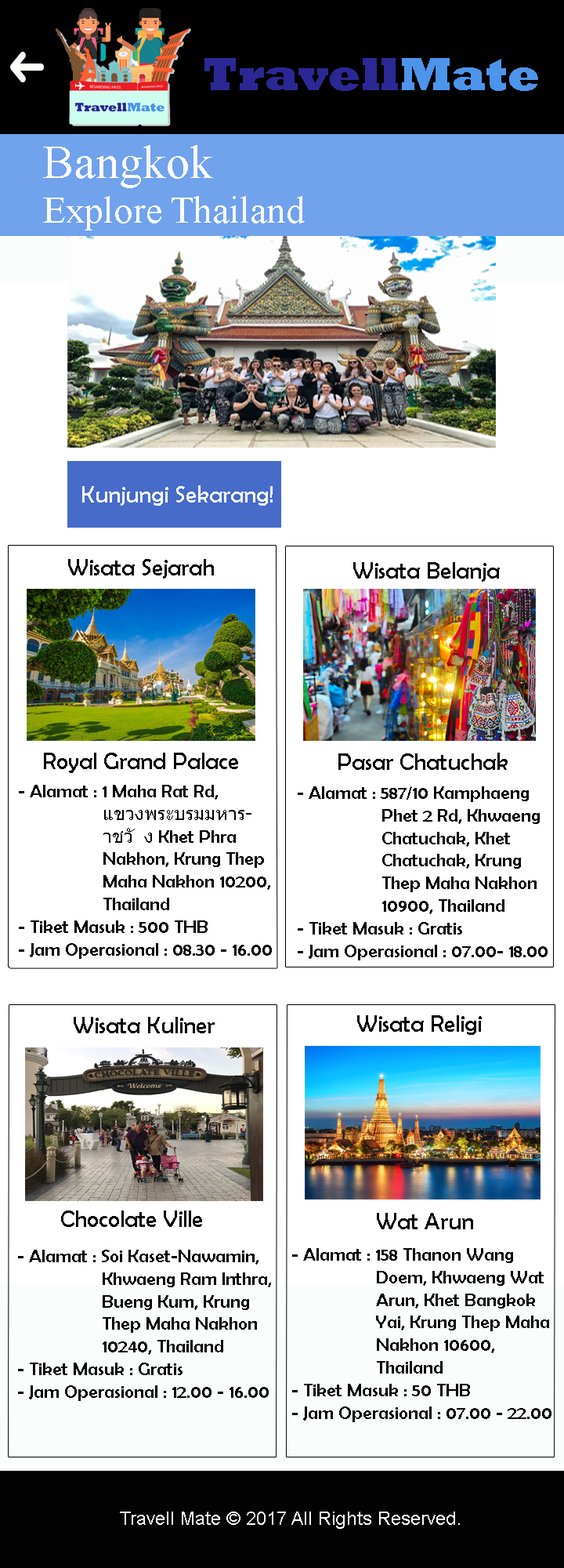
<style>
.page{position:relative;width:564px;height:1568px;background:#ffffff}
.page>*{position:absolute;margin:0}
.t1{font:47px "Rockwell-ExtraBold";color:#2b2896}
.t2{font:47px "Rockwell-ExtraBold";color:#4d94eb}
.t3{font:37.6px "TimesNewRomanPSMT";color:#fafafc}
.t4{font:47px "TimesNewRomanPSMT";color:#fafafc}
.t5{font:23.5px "BerlinSansFB-Reg";color:#fafafc}
.t6{font:23.5px "BerlinSansFB-Reg";color:#000001}
.t7{font:23.5px "BerlinSansFB-Reg";color:#020202}
.t8{font:18.8px "BerlinSansFB-Reg";color:#020202}
.t9{font:18.8px "Tahoma";color:#020202}
.t10{font:18.8px "ArialMT";color:#fcf9f9}
</style>
<div class="page">
<p class="t1" style="left:205px;top:58px;width:334px;height:33px">Travell<span class="t2">Mate</span></p>
<p class="t3" style="left:43px;top:145px;width:262px;height:85px"><span class="t4">Bangkok<br></span>Explore Thailand</p>
<p class="t5" style="left:82px;top:485px;width:191px;height:21px">Kunjungi Sekarang!</p>
<p class="t6" style="left:68px;top:559px;width:146px;height:20px">Wisata Sejarah</p>
<p class="t7" style="left:354px;top:562px;width:146px;height:20px">Wisata Belanja</p>
<p class="t7" style="left:44px;top:753px;width:194px;height:20px">Royal Grand Palace</p>
<p class="t7" style="left:339px;top:753px;width:169px;height:17px">Pasar Chatuchak</p>
<p class="t8" style="left:19px;top:785px;width:253px;height:174px">- Alamat : 1 Maha Rat Rd, <br><span class="t9">   แขวงพระบรมมหาร-<br>   าชวัง</span> Khet Phra <br>   Nakhon, Krung Thep <br>   Maha Nakhon 10200, <br>   Thailand<br>- Tiket Masuk : 500 THB<br>- Jam Operasional : 08.30 - 16.00</p>
<p class="t8" style="left:298px;top:786px;width:250px;height:174px">- Alamat : 587/10 Kamphaeng <br>   Phet 2 Rd, Khwaeng <br>   Chatuchak, Khet <br>   Chatuchak, Krung <br>   Thep Maha Nakhon <br>   10900, Thailand<br>- Tiket Masuk : Gratis<br>- Jam Operasional : 07.00- 18.00</p>
<p class="t7" style="left:74px;top:1017px;width:141px;height:16px">Wisata Kuliner</p>
<p class="t7" style="left:358px;top:1015px;width:124px;height:20px">Wisata Religi</p>
<p class="t7" style="left:61px;top:1210px;width:141px;height:17px">Chocolate Ville</p>
<p class="t7" style="left:377px;top:1213px;width:97px;height:16px">Wat Arun</p>
<p class="t8" style="left:18px;top:1250px;width:253px;height:151px">- Alamat : Soi Kaset-Nawamin, <br>   Khwaeng Ram Inthra, <br>   Bueng Kum, Krung <br>   Thep Maha Nakhon <br>   10240, Thailand<br>- Tiket Masuk : Gratis<br>- Jam Operasional : 12.00 - 16.00</p>
<p class="t8" style="left:292px;top:1248px;width:260px;height:174px">- Alamat : 158 Thanon Wang <br>   Doem, Khwaeng Wat <br>   Arun, Khet Bangkok <br>   Yai, Krung Thep Maha <br>   Nakhon 10600, <br>   Thailand<br>- Tiket Masuk : 50 THB<br>- Jam Operasional : 07.00 - 22.00</p>
<p class="t10" style="left:120px;top:1512px;width:340px;height:17px">Travell Mate © 2017 All Rights Reserved.</p>
</div>
